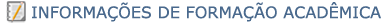
<style>
.page{position:relative;width:390px;height:23px;background:#ffffff}
.page>*{position:absolute;margin:0}
.t1{font:16px "Verdana";color:#49698d}
</style>
<div class="page">
<p class="t1" style="left:32px;top:2px;width:349px;height:20px">INFORMAÇÕES DE FORMAÇÃO ACADÊMICA</p>
</div>
